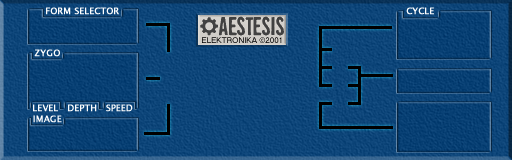
<style>
.page{position:relative;width:512px;height:160px}
.page>*{position:absolute;margin:0}
.t1{font:9px "LucidaSansUnicode";color:#fefefe;font-weight:bold}
</style>
<div class="page">
<p class="t1" style="left:46px;top:7px;width:73px;height:8px">FORM SELECTOR</p>
<p class="t1" style="left:406px;top:7px;width:28px;height:8px">CYCLE</p>
<p class="t1" style="left:34px;top:49px;width:26px;height:8px">ZYGO</p>
<p class="t1" style="left:33px;top:104px;width:25px;height:8px">LEVEL</p>
<p class="t1" style="left:68px;top:104px;width:29px;height:8px">DEPTH</p>
<p class="t1" style="left:106px;top:104px;width:27px;height:8px">SPEED</p>
<p class="t1" style="left:33px;top:115px;width:29px;height:8px">IMAGE</p>
</div>
